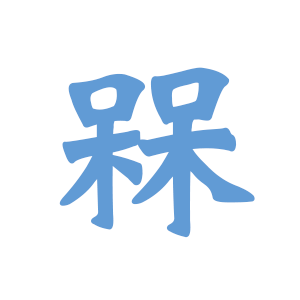
<style>
.page{position:relative;width:300px;height:300px;background:#ffffff}
.page>*{position:absolute;margin:0}
.t1{font:208px "Weibei-SC-Bold";color:#619bd5;font-weight:bold;scale:1.06 1}
</style>
<div class="page">
<p class="t1" style="left:59px;top:67px;width:196px;height:171px">槑</p>
</div>
